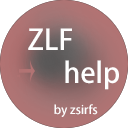
<style>
.page{position:relative;width:128px;height:128px;background:#ffffff}
.page>*{position:absolute;margin:0}
.t1{font:28px "AdobeHeitiStd-Regular";color:#fefefe}
.t2{font:12px "AdobeHeitiStd-Regular";color:#fefefe}
</style>
<div class="page">
<p class="t1" style="left:28px;top:28px;width:91px;height:62px">ZLF<br> help</p>
<p class="t2" style="left:54px;top:104px;width:44px;height:13px">by zsirfs</p>
</div>
